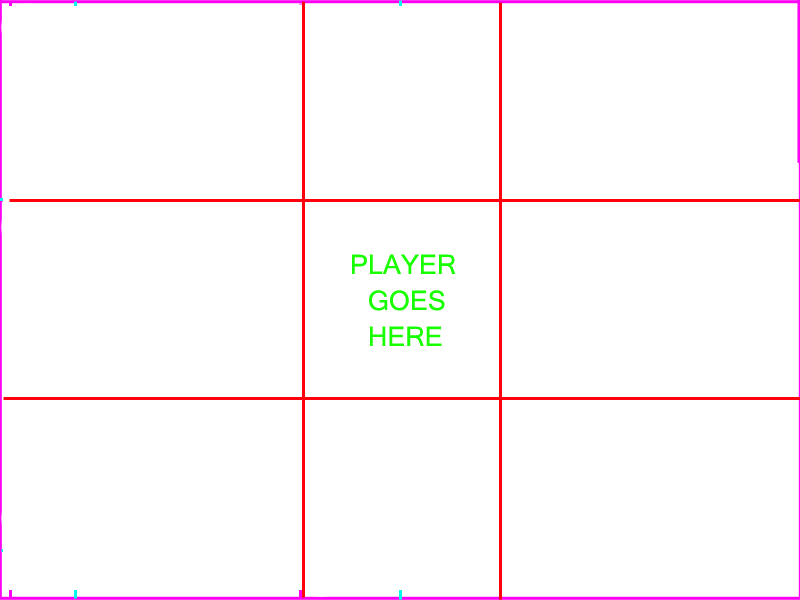
<style>
.page{position:relative;width:800px;height:600px;background:#ffffff}
.page>*{position:absolute;margin:0}
.t1{font:30px "Vrinda";color:#18ff00}
</style>
<div class="page">
<p class="t1" style="left:352px;top:254px;width:104px;height:92px">PLAYER<br> GOES<br> HERE</p>
</div>
